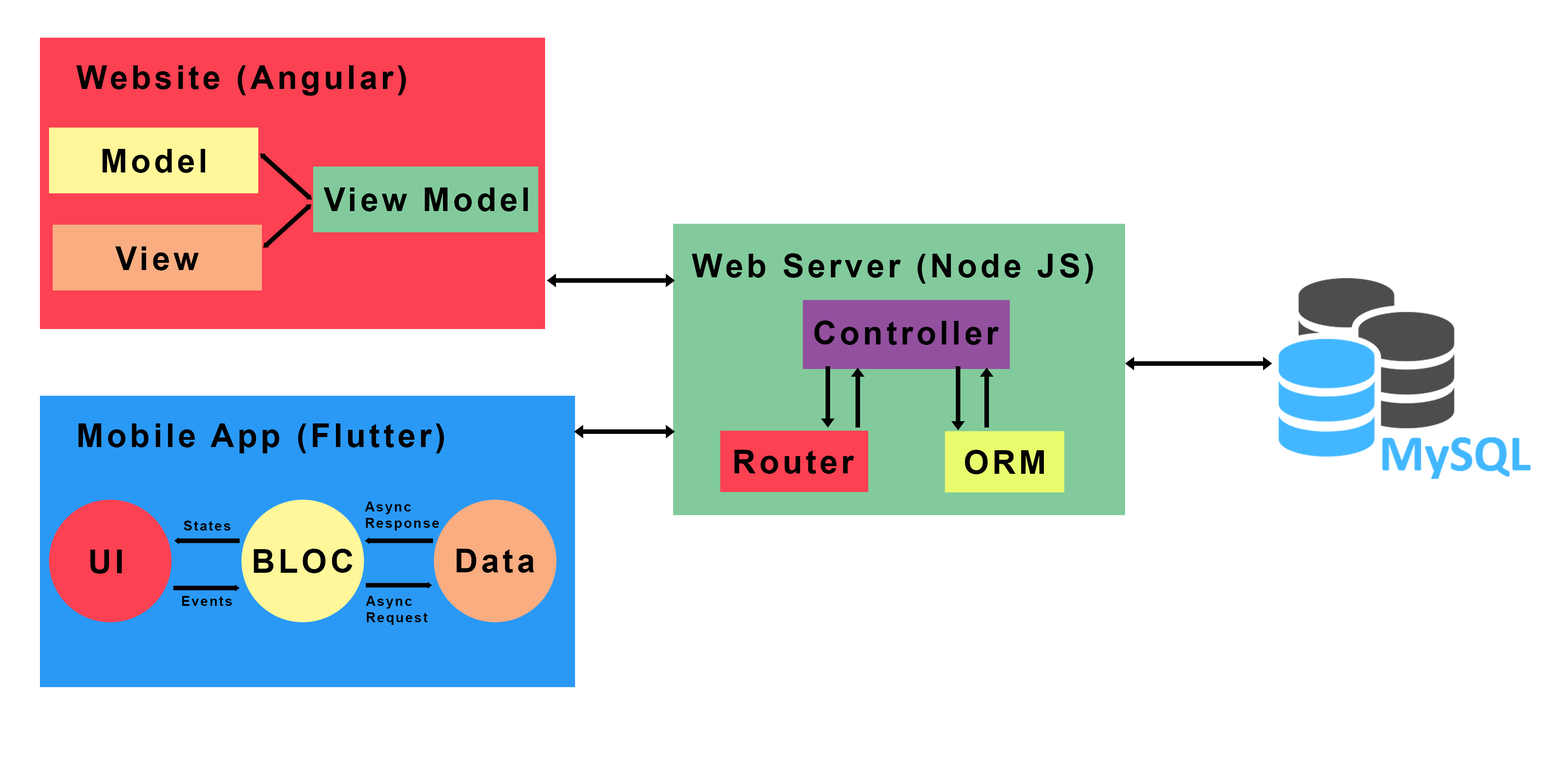
<style>
.page{position:relative;width:1544px;height:772px;background:#ffffff}
.page>*{position:absolute;margin:0}
.t1{font:32.7px "Arial-BoldMT";letter-spacing:0.1em;color:#000000}
.t2{font:13.6px "Arial-BoldMT";letter-spacing:0.1em;color:#000000}
</style>
<div class="page">
<p class="t1" style="left:76px;top:65px;width:330px;height:31px">Website (Angular)</p>
<p class="t1" style="left:103px;top:149px;width:102px;height:24px">Model</p>
<p class="t1" style="left:324px;top:187px;width:204px;height:25px">View Model</p>
<p class="t1" style="left:115px;top:246px;width:84px;height:25px">View</p>
<p class="t1" style="left:692px;top:253px;width:402px;height:31px">Web Server (Node JS)</p>
<p class="t1" style="left:814px;top:320px;width:185px;height:25px">Controller</p>
<p class="t1" style="left:79px;top:424px;width:365px;height:29px">Mobile App (Flutter)</p>
<p class="t1" style="left:734px;top:450px;width:120px;height:24px">Router</p>
<p class="t1" style="left:965px;top:450px;width:79px;height:24px">ORM</p>
<p class="t2" style="left:365px;top:502px;width:74px;height:29px">Async<br>Response</p>
<p class="t2" style="left:184px;top:521px;width:47px;height:10px">States</p>
<p class="t1" style="left:90px;top:550px;width:32px;height:24px">UI</p>
<p class="t1" style="left:254px;top:549px;width:99px;height:24px">BLOC</p>
<p class="t1" style="left:457px;top:549px;width:77px;height:24px">Data</p>
<p class="t2" style="left:182px;top:596px;width:50px;height:10px">Events</p>
<p class="t2" style="left:366px;top:596px;width:62px;height:29px">Async<br>Request</p>
</div>
